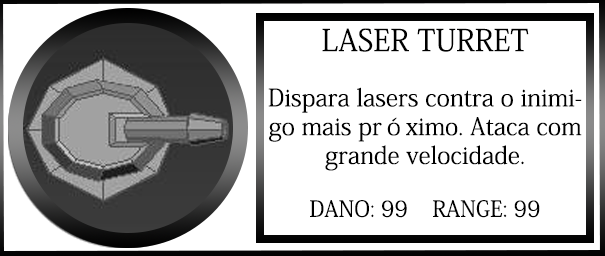
<style>
.page{position:relative;width:605px;height:256px;background:#ffffff}
.page>*{position:absolute;margin:0}
.t1{font:24px "AdobeKaitiStd-Regular";color:#000000}
.t2{font:30px "AdobeKaitiStd-Regular";color:#000000}
.t3{font:22px "AdobeKaitiStd-Regular";color:#000000}
</style>
<div class="page">
<p class="t1" style="left:268px;top:28px;width:314px;height:190px;text-align:center"><span class="t2">LASER TURRET<br><br></span>Dispara lasers contra o inimigo mais próximo. Ataca com grande velocidade.<br><span class="t3"><br>DANO: 99    RANGE: 99</span></p>
</div>
